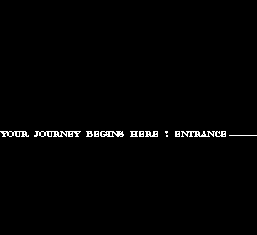
<style>
.page{position:relative;width:257px;height:235px;background:#000000}
.page>*{position:absolute;margin:0}
.t1{font:8px "Elephant-Regular";color:#ffffff}
</style>
<div class="page">
<p class="t1" style="left:0px;top:131px;width:257px;height:6px">YOUR   JOURNEY   BEGINS   HERE   !   ENTRANCE --------------</p>
</div>
